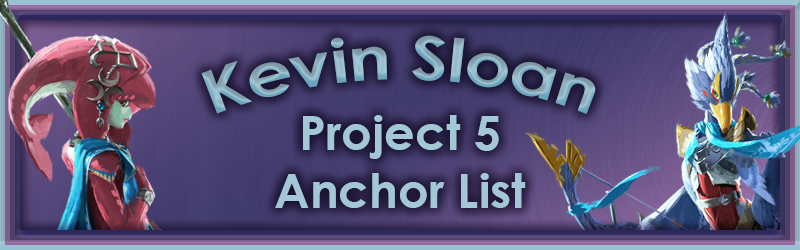
<style>
.page{position:relative;width:800px;height:250px}
.page>*{position:absolute;margin:0}
.t1{font:60px "CenturyGothic-Bold"}
.t2{font:48px "CenturyGothic-Bold";color:#a3c7d6}
</style>
<div class="page">
<p class="t1" style="left:201px;top:35px;width:395px;height:79px">Kevin Sloan</p>
<p class="t2" style="left:275px;top:115px;width:251px;height:93px;text-align:center">Project 5<br>Anchor List</p>
</div>
